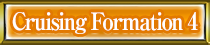
<style>
.page{position:relative;width:210px;height:45px}
.page>*{position:absolute;margin:0}
.t1{font:24px "RyuminPro-ExBold";letter-spacing:-0.08em;color:#ffffff;scale:0.9 1}
</style>
<div class="page">
<p class="t1" style="left:12px;top:12px;width:186px;height:22px">Cruising Formation 4</p>
</div>
